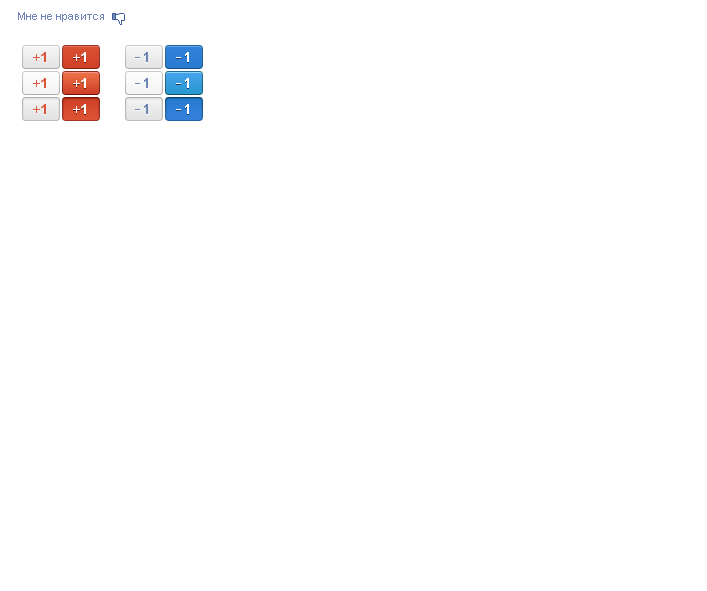
<style>
.page{position:relative;width:707px;height:591px;background:#ffffff}
.page>*{position:absolute;margin:0}
.t1{font:11px "ArialMT";color:#6d84b4}
.t2{font:17px "ArialMT";letter-spacing:-0.06em;color:#6d84b4}
.t3{font:14px "Arial-BoldMT";letter-spacing:-0.06em;color:#6d84b4}
.t4{font:17px "ArialMT";letter-spacing:-0.06em}
.t5{font:14px "Arial-BoldMT";letter-spacing:-0.06em}
.t6{font:17px "ArialMT";letter-spacing:-0.06em;color:#ffffff}
.t7{font:14px "Arial-BoldMT";letter-spacing:-0.06em;color:#ffffff}
</style>
<div class="page">
<p class="t1" style="left:18px;top:12px;width:86px;height:10px">Мне не нравится</p>
<p class="t2" style="left:135px;top:53px;width:13px;height:10px">-<span class="t3"> 1</span></p>
<p class="t2" style="left:135px;top:52px;width:13px;height:10px">-<span class="t3"> 1</span></p>
<p class="t4" style="left:176px;top:53px;width:13px;height:10px">-<span class="t5"> 1</span></p>
<p class="t6" style="left:176px;top:52px;width:13px;height:10px">-<span class="t7"> 1</span></p>
<p class="t2" style="left:135px;top:78px;width:13px;height:10px">-<span class="t3"> 1</span></p>
<p class="t6" style="left:176px;top:78px;width:13px;height:10px">-<span class="t7"> 1</span></p>
<p class="t2" style="left:135px;top:79px;width:13px;height:10px">-<span class="t3"> 1</span></p>
<p class="t4" style="left:176px;top:79px;width:13px;height:10px">-<span class="t5"> 1</span></p>
<p class="t2" style="left:135px;top:105px;width:13px;height:10px">-<span class="t3"> 1</span></p>
<p class="t2" style="left:135px;top:104px;width:13px;height:10px">-<span class="t3"> 1</span></p>
<p class="t4" style="left:176px;top:105px;width:13px;height:10px">-<span class="t5"> 1</span></p>
<p class="t6" style="left:176px;top:104px;width:13px;height:10px">-<span class="t7"> 1</span></p>
</div>
